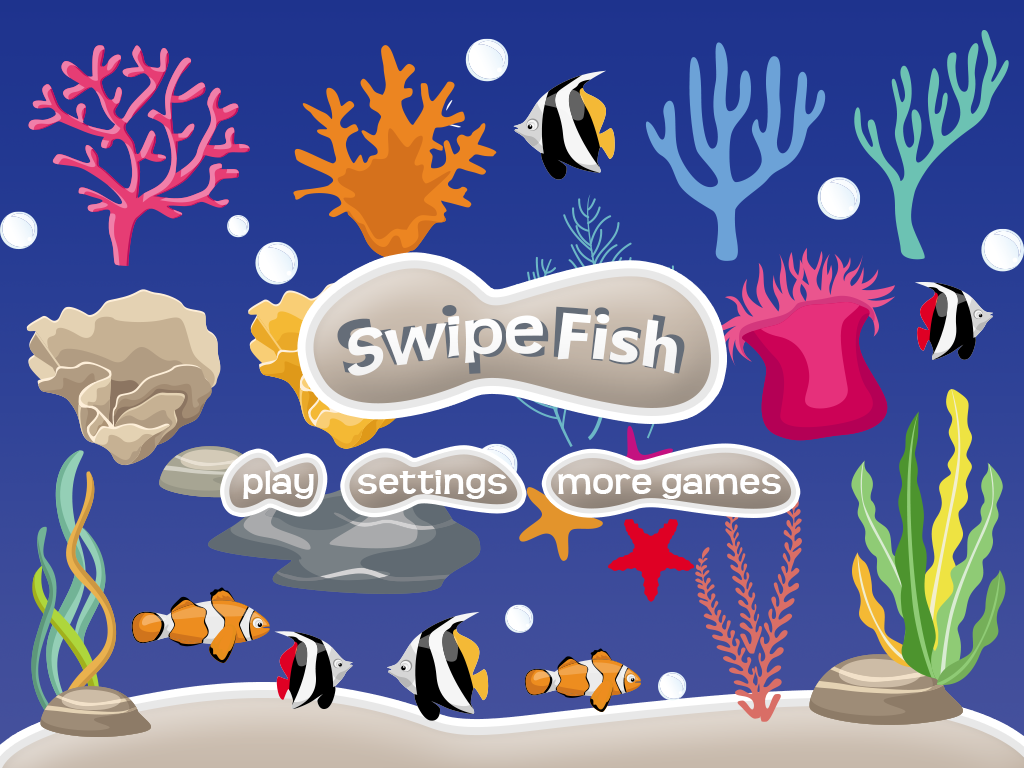
<style>
.page{position:relative;width:1024px;height:768px}
.page>*{position:absolute;margin:0}
.t1{font:73.2px "Teen-Bold";color:#ffffff;scale:0.96 1}
.t2{font:69px "SegoeUI-Bold";color:#ffffff}
.t3{font:36px "Teen-Bold";color:#ffffff}
</style>
<div class="page">
<p class="t1" style="left:347px;top:315px;width:196px;height:61px;rotate:-6deg">Swipe</p>
<p class="t2" style="left:557px;top:312px;width:120px;height:62px;rotate:7deg">Fish</p>
<p class="t3" style="left:243px;top:470px;width:538px;height:29px">play     settings      more games</p>
</div>
